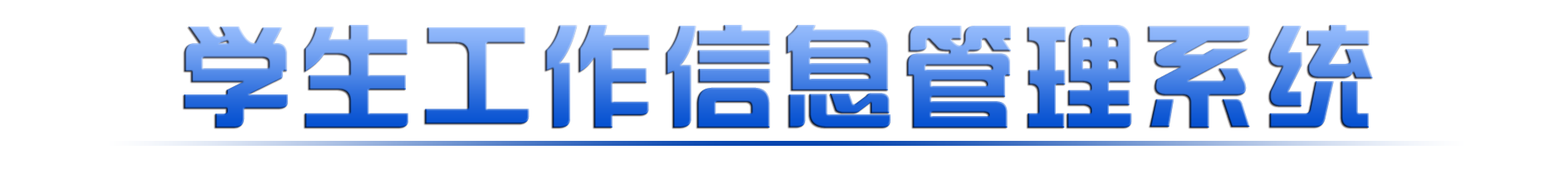
<style>
.page{position:relative;width:1568px;height:169px;background:#ffffff}
.page>*{position:absolute;margin:0}
.t1{font:109.6px "FZHZGBJW--GB1-0";letter-spacing:0.1em}
</style>
<div class="page">
<p class="t1" style="left:183px;top:25px;width:1190px;height:103px">学生工作信息管理系统</p>
</div>
